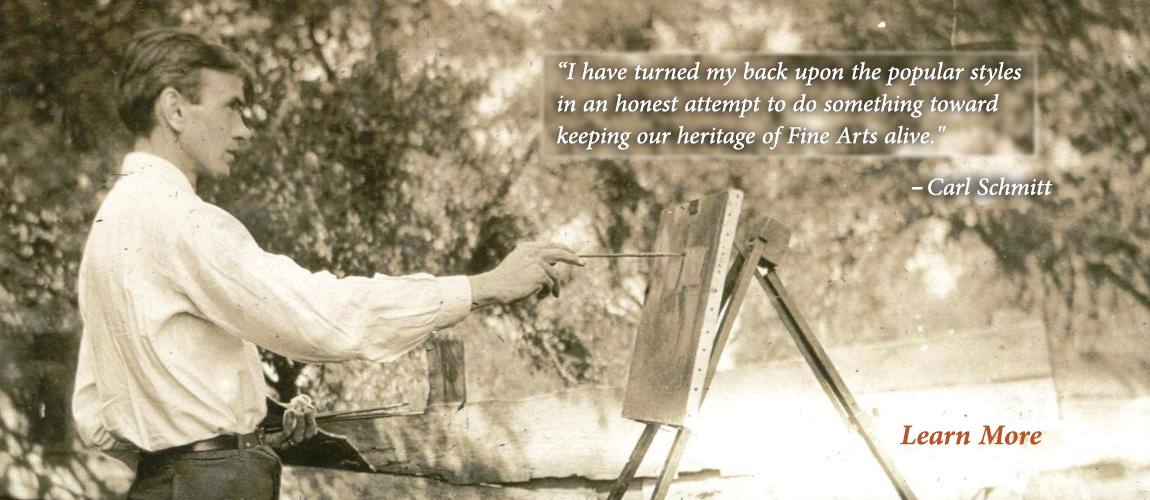
<style>
.page{position:relative;width:1150px;height:500px}
.page>*{position:absolute;margin:0}
.t1{font:34px/32px "AdobeArabic-Italic";color:#ffffff}
.t2{font:34px "AdobeArabic-Italic";color:#ffffff}
.t3{font:34px "Waseem";color:#ffffff}
.t4{font:40px "AdobeArabic-BoldItalic";color:#b5552b}
</style>
<div class="page">
<p class="t1" style="left:557px;top:61px;width:465px;height:89px">“I have turned my back upon the popular styles <br>in an honest attempt to do something toward <br>keeping our heritage of Fine Arts alive."</p>
<p class="t2" style="left:911px;top:177px;width:142px;height:19px"><span class="t3">- </span>Carl Schmitt</p>
<p class="t4" style="left:900px;top:425px;width:142px;height:20px">Learn More</p>
</div>
